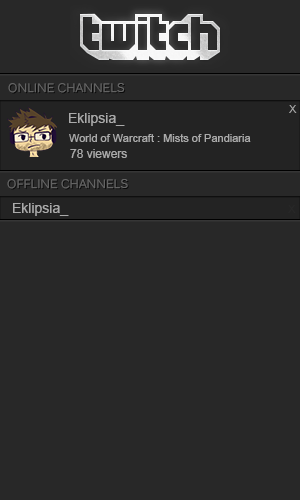
<style>
.page{position:relative;width:300px;height:500px;background:#282828}
.page>*{position:absolute;margin:0}
.t1{font:12px "Kalinga";color:#666666}
.t2{font:14px "ArialMT";color:#aaaaaa}
.t3{font:11px "ArialMT";color:#aaaaaa}
.t4{font:12px "ArialMT";color:#aaaaaa}
</style>
<div class="page">
<p class="t1" style="left:8px;top:83px;width:117px;height:10px">ONLINE CHANNELS</p>
<p class="t2" style="left:69px;top:113px;width:56px;height:13px">Eklipsia_</p>
<p class="t3" style="left:289px;top:105px;width:8px;height:8px">X</p>
<p class="t3" style="left:69px;top:134px;width:182px;height:8px">World of Warcraft : Mists of Pandiaria</p>
<p class="t4" style="left:70px;top:149px;width:57px;height:9px">78 viewers</p>
<p class="t1" style="left:7px;top:179px;width:121px;height:10px">OFFLINE CHANNELS</p>
<p class="t2" style="left:13px;top:203px;width:56px;height:13px">Eklipsia_</p>
</div>
